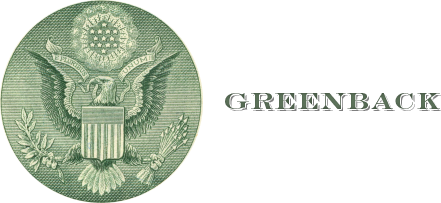
<style>
.page{position:relative;width:441px;height:203px;background:#ffffff}
.page>*{position:absolute;margin:0}
.t1{font:34.1px "EngraversLH-BoldFace";color:#566a54}
</style>
<div class="page">
<p class="t1" style="left:225px;top:93px;width:215px;height:16px">GREENBACK</p>
</div>
